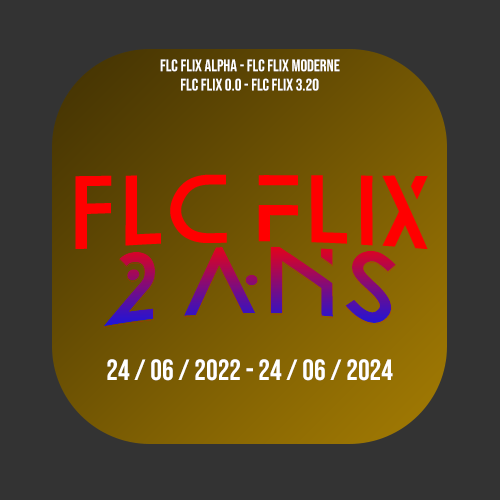
<style>
.page{position:relative;width:500px;height:500px;background:#333333}
.page>*{position:absolute;margin:0}
.t1{font:16.7px "BebasNeue-Regular";color:#ffffff}
.t2{font:29.2px "BebasNeue-Regular";color:#ffffff}
</style>
<div class="page">
<p class="t1" style="left:160px;top:59px;width:180px;height:13px">FLC Flix Alpha - FLC Flix Moderne</p>
<p class="t1" style="left:181px;top:78px;width:138px;height:13px">FLC Flix 0.0 - FLC Flix 3.20</p>
<p class="t2" style="left:107px;top:359px;width:286px;height:22px">24 / 06 / 2022 - 24 / 06 / 2024</p>
</div>
